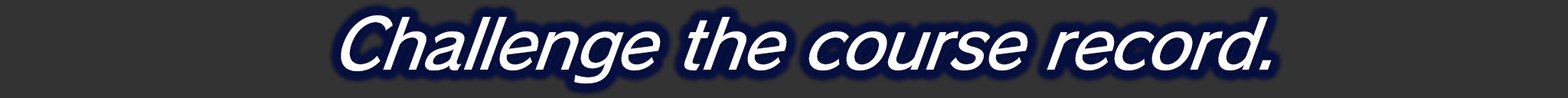
<style>
.page{position:relative;width:1568px;height:98px;background:#333333}
.page>*{position:absolute;margin:0}
.t1{font:72px "RodinPro-DB";letter-spacing:-0.02em;color:#ffffff;scale:0.94 1}
</style>
<div class="page">
<p class="t1" style="left:341px;top:15px;width:931px;height:68px">Challenge the course record.</p>
</div>
